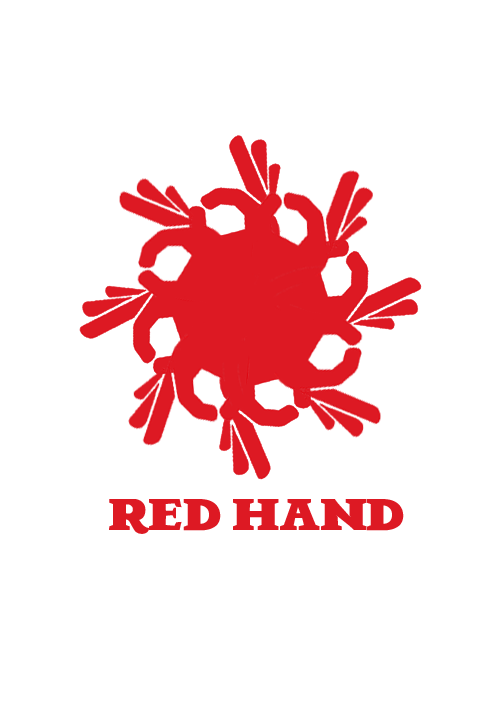
<style>
.page{position:relative;width:500px;height:720px;background:#ffffff}
.page>*{position:absolute;margin:0}
.t1{font:50px "Brava";color:#dd1923}
</style>
<div class="page">
<p class="t1" style="left:109px;top:499px;width:295px;height:35px">RED HAND</p>
</div>
